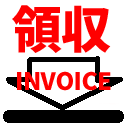
<style>
.page{position:relative;width:128px;height:128px;background:#ffffff}
.page>*{position:absolute;margin:0}
.t1{font:50px "NotoSansJP-Black";letter-spacing:-0.025em;color:#ff0000}
.t2{font:24px "NotoSansJP-Black";letter-spacing:-0.025em;color:#ff0000}
</style>
<div class="page">
<p class="t1" style="left:12px;top:5px;width:99px;height:48px">領収</p>
<p class="t2" style="left:17px;top:71px;width:94px;height:20px">INVOICE</p>
</div>
